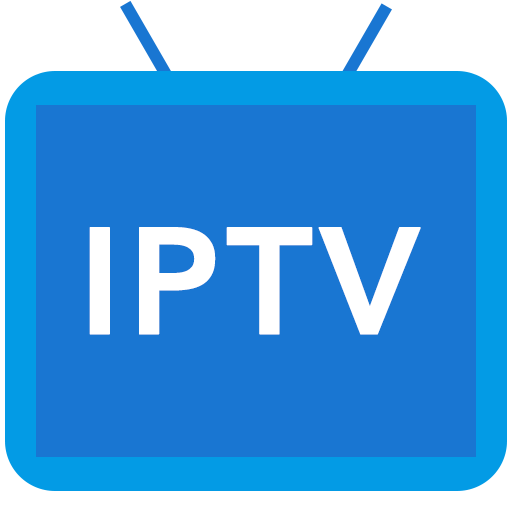
<style>
.page{position:relative;width:512px;height:512px;background:#1976d2}
.page>*{position:absolute;margin:0}
.t1{font:150px "Avenir-Heavy";letter-spacing:0.02em;color:#ffffff;font-weight:bold}
</style>
<div class="page">
<p class="t1" style="left:89px;top:227px;width:332px;height:108px">IPTV</p>
</div>
